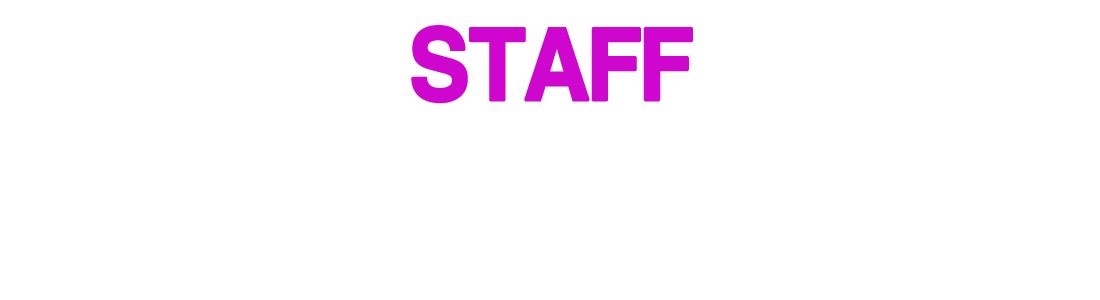
<style>
.page{position:relative;width:1100px;height:300px;background:#ffffff}
.page>*{position:absolute;margin:0}
.t1{font:93.9px "H2gtrE";letter-spacing:-0.1em;color:#ce06ce;font-weight:bold;scale:0.94 1}
</style>
<div class="page">
<p class="t1" style="left:411px;top:25px;width:282px;height:79px">STAFF</p>
</div>
